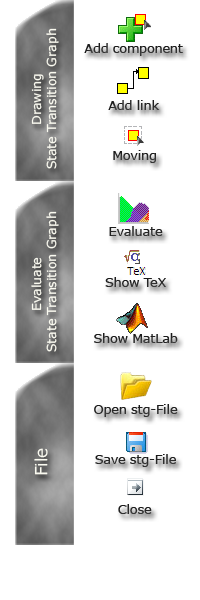
<style>
.page{position:relative;width:200px;height:600px;background:#ffffff}
.page>*{position:absolute;margin:0}
.t1{font:12.5px "Verdana";color:#efedde}
.t2{font:12.5px "Verdana";color:#666666}
.t3{font:16.7px "Verdana";color:#efedde}
</style>
<div class="page">
<p class="t1" style="left:31px;top:28px;width:28px;height:141px;text-align:center;rotate:-90deg">Drawing <br>State Transition Graph</p>
<p class="t2" style="left:84px;top:43px;width:99px;height:13px">Add component</p>
<p class="t2" style="left:108px;top:100px;width:52px;height:10px">Add link</p>
<p class="t2" style="left:113px;top:150px;width:43px;height:13px">Moving</p>
<p class="t1" style="left:31px;top:211px;width:28px;height:141px;text-align:center;rotate:-90deg">Evaluate<br> State Transition Graph</p>
<p class="t2" style="left:109px;top:226px;width:54px;height:10px">Evaluate</p>
<p class="t2" style="left:105px;top:277px;width:61px;height:10px">Show TeX</p>
<p class="t2" style="left:94px;top:333px;width:84px;height:10px">Show MatLab</p>
<p class="t2" style="left:94px;top:404px;width:84px;height:13px">Open stg-File</p>
<p class="t3" style="left:34px;top:448px;width:14px;height:27px;rotate:-90deg">File</p>
<p class="t2" style="left:95px;top:454px;width:81px;height:13px">Save stg-File</p>
<p class="t2" style="left:118px;top:504px;width:34px;height:10px">Close</p>
</div>
